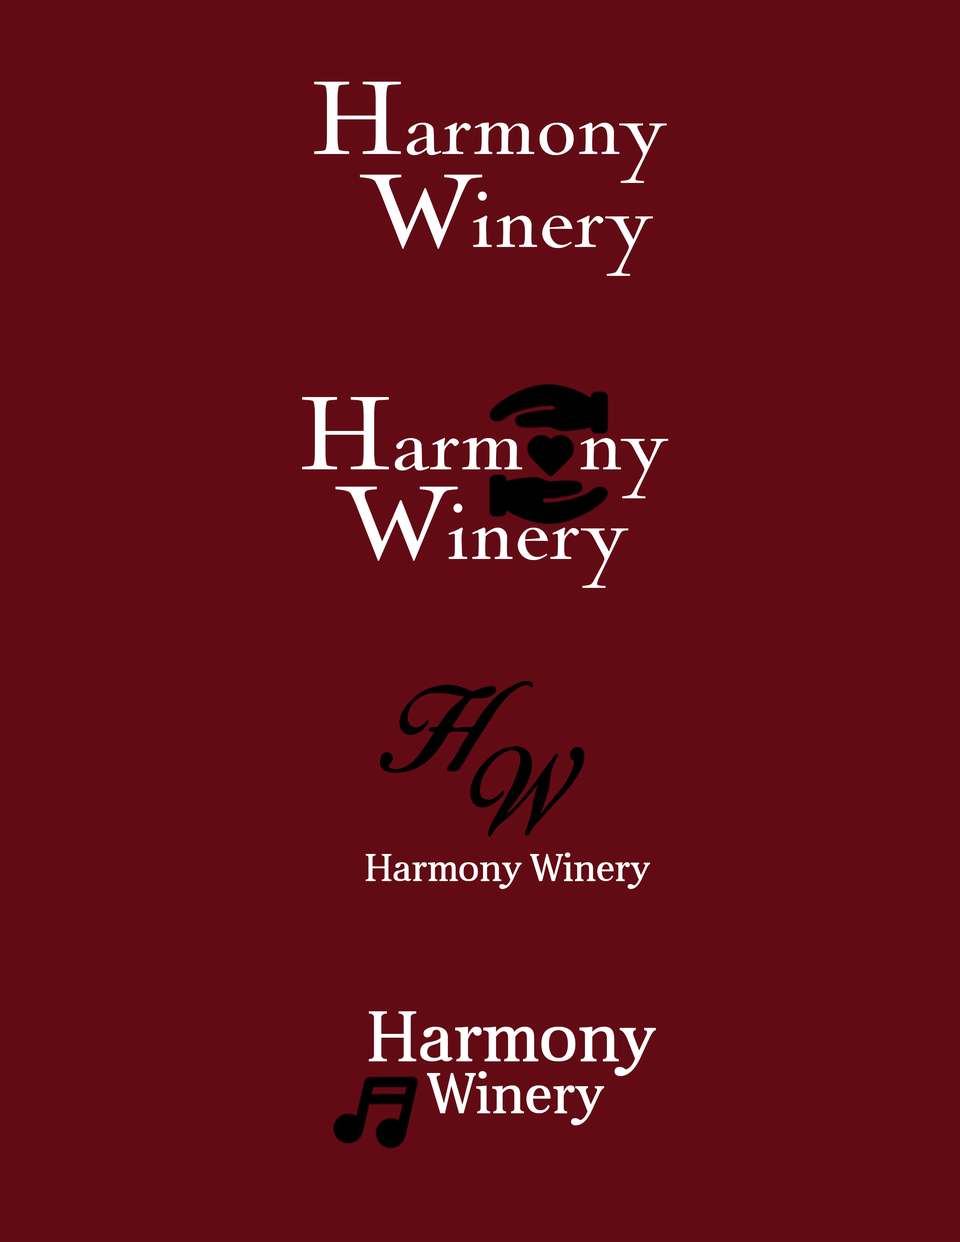
<style>
.page{position:relative;width:960px;height:1242px;background:#630b15}
.page>*{position:absolute;margin:0}
.t1{font:108.2px "NicolasCocT-Regu";color:#ffffff}
.t2{font:108.2px/89.4px "NicolasCocT-Regu";color:#ffffff}
.t3{font:108.2px "BirdsofParadise";color:#000000}
.t4{font:39.2px "Aver";color:#ffffff}
.t5{font:72.2px "Aver";color:#ffffff}
.t6{font:58px "Aver";color:#ffffff}
</style>
<div class="page">
<p class="t1" style="left:314px;top:82px;width:353px;height:101px">Harmony</p>
<p class="t1" style="left:360px;top:175px;width:293px;height:101px">Winery</p>
<p class="t2" style="left:302px;top:397px;width:366px;height:191px;text-align:center">Harm  ny<br>Winery</p>
<p class="t3" style="left:380px;top:681px;width:153px;height:92px">H</p>
<p class="t3" style="left:470px;top:746px;width:114px;height:91px">W</p>
<p class="t4" style="left:366px;top:853px;width:284px;height:36px">Harmony Winery</p>
<p class="t5" style="left:369px;top:1011px;width:287px;height:65px">Harmony</p>
<p class="t6" style="left:427px;top:1071px;width:177px;height:55px">Winery</p>
</div>
